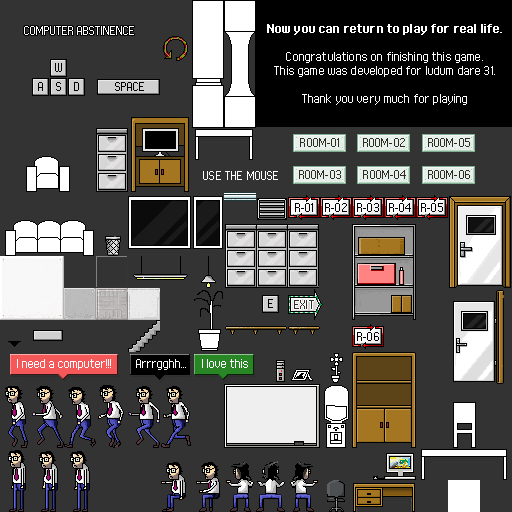
<style>
.page{position:relative;width:512px;height:512px;background:#333333}
.page>*{position:absolute;margin:0}
.t1{font:8px "FFFExecutive";color:#ffffff}
.t2{font:8px/14px "FFFExecutive";letter-spacing:0.02em;color:#ffffff}
.t3{font:8px/14px "FFFExecutiveBold";letter-spacing:0.02em;color:#ffffff}
.t4{font:8px "FFFExecutive";color:#000000}
.t5{font:8px "FFFExecutive";letter-spacing:0.02em;color:#2f2c24}
.t6{font:8px "FFFExecutive";letter-spacing:0.02em;color:#ffffff}
.t7{font:8px "FFFExecutive";letter-spacing:0.02em;color:#000000}
</style>
<div class="page">
<p class="t1" style="left:24px;top:26px;width:110px;height:9px">COMPUTER ABSTINENCE</p>
<p class="t2" style="left:267px;top:24px;width:235px;height:81px;text-align:center"><span class="t3">Now you can return to play for real life.<br><br></span>Congratulations on finishing this game.<br>This game was developed for ludum dare 31.<br><br>Thank you very much for playing</p>
<p class="t4" style="left:55px;top:63px;width:7px;height:9px">W</p>
<p class="t4" style="left:38px;top:82px;width:5px;height:9px">A</p>
<p class="t4" style="left:56px;top:82px;width:5px;height:9px">S</p>
<p class="t4" style="left:74px;top:82px;width:5px;height:9px">D</p>
<p class="t4" style="left:115px;top:82px;width:29px;height:9px">SPACE</p>
<p class="t5" style="left:300px;top:138px;width:39px;height:9px">ROOM-01</p>
<p class="t5" style="left:363px;top:138px;width:42px;height:9px">ROOM-02</p>
<p class="t5" style="left:428px;top:138px;width:42px;height:9px">ROOM-05</p>
<p class="t6" style="left:203px;top:171px;width:75px;height:9px">USE THE MOUSE</p>
<p class="t5" style="left:299px;top:170px;width:42px;height:9px">ROOM-03</p>
<p class="t5" style="left:363px;top:170px;width:43px;height:9px">ROOM-04</p>
<p class="t5" style="left:428px;top:170px;width:42px;height:9px">ROOM-06</p>
<p class="t7" style="left:295px;top:203px;width:18px;height:9px">R-01</p>
<p class="t7" style="left:325px;top:203px;width:22px;height:9px">R-02</p>
<p class="t7" style="left:357px;top:203px;width:22px;height:9px">R-03</p>
<p class="t7" style="left:389px;top:203px;width:22px;height:9px">R-04</p>
<p class="t7" style="left:421px;top:203px;width:22px;height:9px">R-05</p>
<p class="t4" style="left:268px;top:299px;width:5px;height:9px">E</p>
<p class="t5" style="left:294px;top:300px;width:20px;height:9px">EXIT</p>
<p class="t7" style="left:357px;top:332px;width:22px;height:9px">R-06</p>
<p class="t1" style="left:17px;top:359px;width:94px;height:11px">I need a computer!!!</p>
<p class="t1" style="left:136px;top:359px;width:50px;height:11px">Arrrgghh...</p>
<p class="t1" style="left:202px;top:359px;width:46px;height:9px">I love this</p>
</div>
